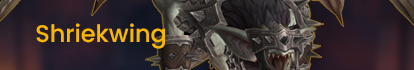
<style>
.page{position:relative;width:414px;height:70px}
.page>*{position:absolute;margin:0}
.t1{font:24px "Poppins-Medium";color:#f8b700}
</style>
<div class="page">
<p class="t1" style="left:36px;top:23px;width:129px;height:26px">Shriekwing</p>
</div>
